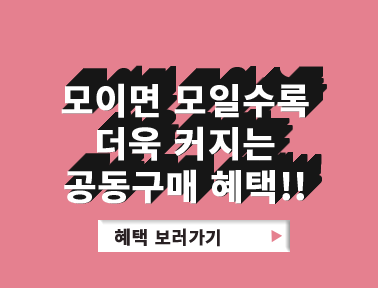
<style>
.page{position:relative;width:378px;height:288px;background:#e5808f}
.page>*{position:absolute;margin:0}
.t1{font:36px "NotoSansKR-Bold";color:#fffefe;font-weight:bold}
.t2{font:36px "NotoSansKR-Bold";color:#ffffff;font-weight:bold}
.t3{font:36px "NotoSansKR-Bold";font-weight:bold}
.t4{font:18px "NotoSansKR-Bold";color:#292123;font-weight:bold}
</style>
<div class="page">
<p class="t1" style="left:61px;top:83px;width:248px;height:121px;text-align:center">모이면 모일수록<br>더욱 커지는<br>공동구매 혜택!!</p>
<p class="t2" style="left:62px;top:82px;width:248px;height:121px;text-align:center">모이면 모일수록<br>더욱 커지는<br>공동구매 혜택!!</p>
<p class="t2" style="left:62px;top:83px;width:248px;height:121px;text-align:center">모이면 모일수록<br>더욱 커지는<br>공동구매 혜택!!</p>
<p class="t3" style="left:63px;top:81px;width:248px;height:121px;text-align:center">모이면 모일수록<br>더욱 커지는<br>공동구매 혜택!!</p>
<p class="t3" style="left:63px;top:82px;width:248px;height:121px;text-align:center">모이면 모일수록<br>더욱 커지는<br>공동구매 혜택!!</p>
<p class="t4" style="left:115px;top:228px;width:105px;height:19px">혜택 보러가기</p>
</div>
